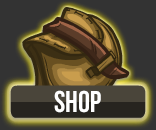
<style>
.page{position:relative;width:156px;height:130px;background:#333333}
.page>*{position:absolute;margin:0}
.t1{font:30px "BebasNeueCyrillic";color:#ffffff}
</style>
<div class="page">
<p class="t1" style="left:54px;top:90px;width:47px;height:23px">SHOP</p>
</div>
